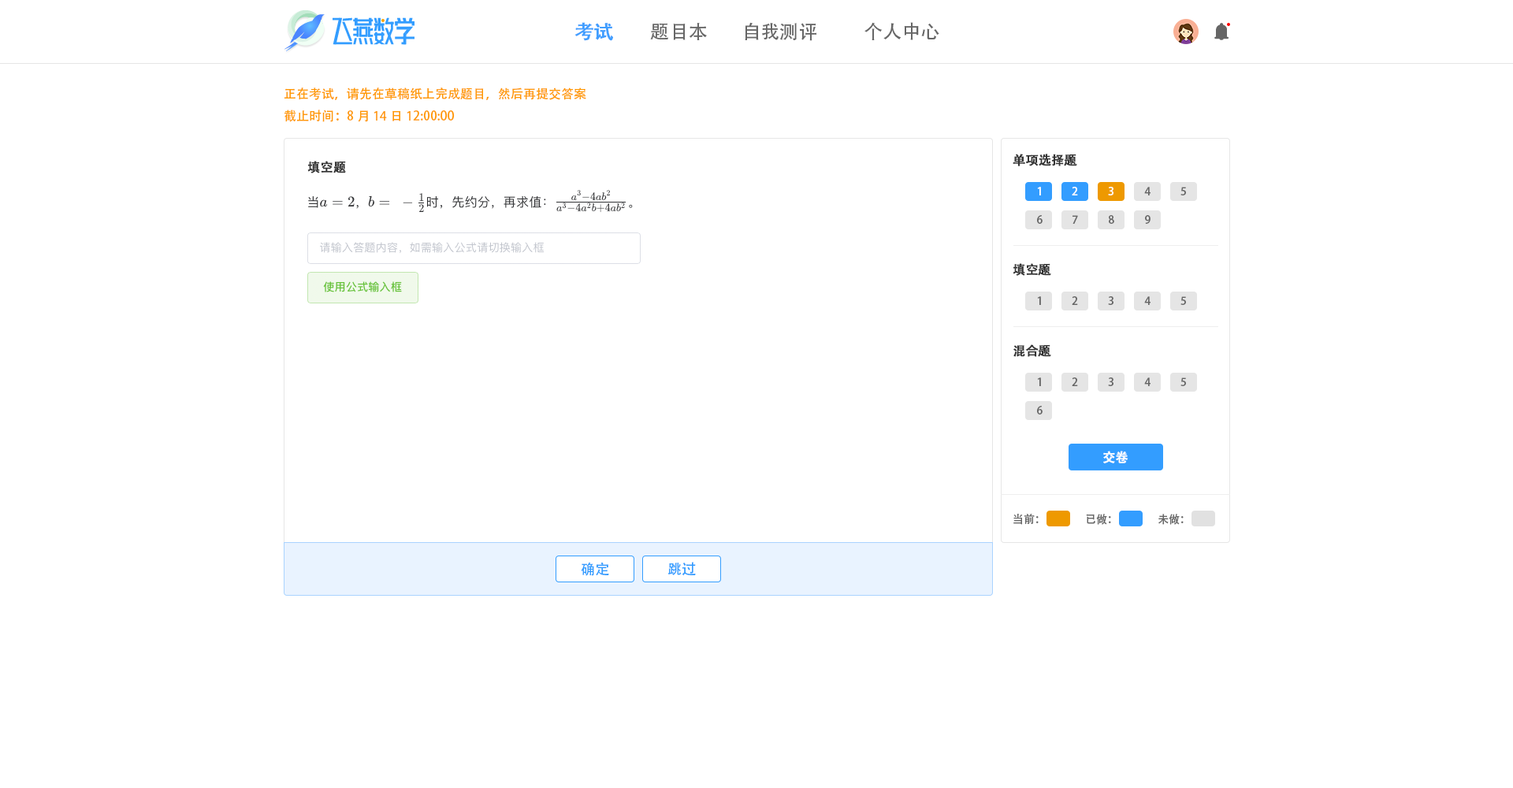
<style>
.page{position:relative;width:1513px;height:788px;background:#ffffff}
.page>*{position:absolute;margin:0}
.t1{font:18.9px "AdobeHeitiStd-Regular";color:#409eff;font-weight:bold}
.t2{font:18.9px "AdobeHeitiStd-Regular";color:#666666}
.t3{font:12.6px "AdobeHeitiStd-Regular";color:#ff9902}
.t4{font:12.6px "AdobeHeitiStd-Regular";color:#333333;font-weight:bold}
.t5{font:11px "AdobeHeitiStd-Regular";color:#ffffff}
.t6{font:11px "AdobeHeitiStd-Regular";color:#666666}
.t7{font:12.6px "AdobeHeitiStd-Regular";color:#ffffff;font-weight:bold}
.t8{font:14.2px "AdobeHeitiStd-Regular";color:#339dff}
</style>
<div class="page">
<p class="t1" style="left:575px;top:22px;width:38px;height:19px">考试</p>
<p class="t2" style="left:650px;top:23px;width:57px;height:17px">题目本</p>
<p class="t2" style="left:745px;top:22px;width:71px;height:19px">自我测评</p>
<p class="t2" style="left:865px;top:22px;width:74px;height:18px">个人中心</p>
<p class="t3" style="left:284px;top:87px;width:302px;height:13px">正在考试，请先在草稿纸上完成题目，然后再提交答案</p>
<p class="t3" style="left:284px;top:110px;width:171px;height:12px">截止时间：8月14日12:00:00</p>
<p class="t4" style="left:307px;top:161px;width:39px;height:12px">填空题</p>
<p class="t4" style="left:1013px;top:154px;width:64px;height:12px">单项选择题</p>
<p class="t5" style="left:1037px;top:187px;width:4px;height:8px">1</p>
<p class="t5" style="left:1072px;top:187px;width:6px;height:8px">2</p>
<p class="t5" style="left:1108px;top:187px;width:6px;height:8px">3</p>
<p class="t6" style="left:1144px;top:187px;width:7px;height:8px">4</p>
<p class="t6" style="left:1181px;top:187px;width:5px;height:8px">5</p>
<p class="t6" style="left:1037px;top:215px;width:6px;height:9px">6</p>
<p class="t6" style="left:1073px;top:215px;width:5px;height:9px">7</p>
<p class="t6" style="left:1109px;top:215px;width:5px;height:9px">8</p>
<p class="t6" style="left:1145px;top:215px;width:6px;height:9px">9</p>
<p class="t4" style="left:1013px;top:263px;width:38px;height:13px">填空题</p>
<p class="t6" style="left:1037px;top:296px;width:4px;height:9px">1</p>
<p class="t6" style="left:1072px;top:296px;width:6px;height:9px">2</p>
<p class="t6" style="left:1108px;top:296px;width:6px;height:9px">3</p>
<p class="t6" style="left:1144px;top:296px;width:7px;height:9px">4</p>
<p class="t6" style="left:1181px;top:296px;width:5px;height:9px">5</p>
<p class="t4" style="left:1013px;top:344px;width:38px;height:13px">混合题</p>
<p class="t6" style="left:1037px;top:377px;width:4px;height:9px">1</p>
<p class="t6" style="left:1072px;top:377px;width:6px;height:9px">2</p>
<p class="t6" style="left:1108px;top:377px;width:6px;height:9px">3</p>
<p class="t6" style="left:1144px;top:377px;width:7px;height:9px">4</p>
<p class="t6" style="left:1181px;top:377px;width:5px;height:9px">5</p>
<p class="t6" style="left:1037px;top:406px;width:6px;height:9px">6</p>
<p class="t7" style="left:1103px;top:451px;width:26px;height:12px">交卷</p>
<p class="t6" style="left:1013px;top:514px;width:26px;height:11px">当前：</p>
<p class="t6" style="left:1086px;top:514px;width:25px;height:11px">已做：</p>
<p class="t6" style="left:1158px;top:514px;width:26px;height:11px">未做：</p>
<p class="t8" style="left:581px;top:562px;width:28px;height:14px">确定</p>
<p class="t8" style="left:668px;top:562px;width:28px;height:14px">跳过</p>
</div>
